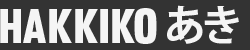
<style>
.page{position:relative;width:250px;height:50px;background:#333333}
.page>*{position:absolute;margin:0}
.t1{font:42px "AdobeGothicStd-Bold";letter-spacing:0.38em;color:#f5f5f5}
.t2{font:48px "Muro-Regular";color:#f5f5f5}
.t3{font:48px "Muro-Regular";letter-spacing:0.04em;color:#f5f5f5}
.t4{font:48px "Muro-Regular";letter-spacing:-0.08em;color:#f5f5f5}
</style>
<div class="page">
<p class="t1" style="left:204px;top:6px;width:35px;height:38px">き</p>
<p class="t2" style="left:0px;top:8px;width:157px;height:36px">hakk<span class="t3">i</span><span class="t4">k</span>o</p>
</div>
